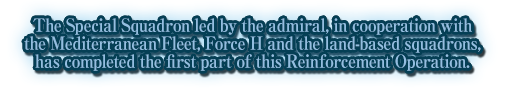
<style>
.page{position:relative;width:506px;height:89px;background:#053f55}
.page>*{position:absolute;margin:0}
.t1{font:18px/18px "RyuminPro-ExBold";letter-spacing:-0.04em;color:#93bee0;scale:0.9 1}
</style>
<div class="page">
<p class="t1" style="left:24px;top:18px;width:457px;height:53px;text-align:center">The Special Squadron led by the admiral, in cooperation with<br>the Mediterranean Fleet, Force H and the land-based squadrons,<br>has completed the first part of this Reinforcement Operation.</p>
</div>
